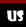
<style>
.page{position:relative;width:26px;height:27px;background:#000000}
.page>*{position:absolute;margin:0}
.t1{font:14px "ShowcardGothic-Reg";color:#ffffff}
</style>
<div class="page">
<p class="t1" style="left:7px;top:10px;width:17px;height:12px">us</p>
</div>
